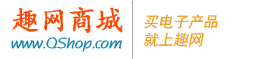
<style>
.page{position:relative;width:258px;height:59px;background:#ffffff}
.page>*{position:absolute;margin:0}
.t1{font:15px "-";color:#0a83b0;font-weight:bold}
.t2{font:28px "¿¬Ìå";color:#ff4800;font-weight:bold}
.t3{font:15px "SimHei";color:#ee9b18;font-style:italic}
</style>
<div class="page">
<p class="t1" style="left:11px;top:7px;width:112px;height:45px"><span class="t2">趣网商城<br></span>www.QShop.com</p>
<p class="t3" style="left:143px;top:14px;width:75px;height:33px">买电子产品<br>就上趣网</p>
</div>
